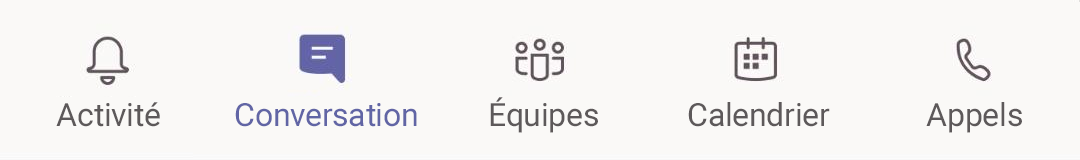
<style>
.page{position:relative;width:1080px;height:160px;background:#faf9f7}
.page>*{position:absolute;margin:0}
.t1{font:32px "Roboto-Regular";color:#5d595a}
.t2{font:32px "Roboto-Regular";color:#6165a5}
</style>
<div class="page">
<p class="t1" style="left:56px;top:102px;width:104px;height:25px">Activité</p>
<p class="t1" style="left:490px;top:97px;width:108px;height:36px">Équipes</p>
<p class="t1" style="left:688px;top:102px;width:142px;height:25px">Calendrier</p>
<p class="t1" style="left:926px;top:102px;width:96px;height:31px">Appels</p>
<p class="t2" style="left:235px;top:103px;width:182px;height:24px">Conversation</p>
</div>
